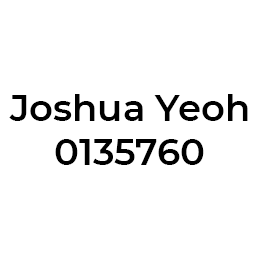
<style>
.page{position:relative;width:256px;height:256px;background:#ffffff}
.page>*{position:absolute;margin:0}
.t1{font:37px "Montserrat-SemiBold";color:#000000}
</style>
<div class="page">
<p class="t1" style="left:9px;top:94px;width:239px;height:71px;text-align:center">Joshua Yeoh<br>0135760</p>
</div>
